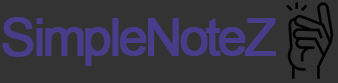
<style>
.page{position:relative;width:338px;height:83px;background:#333333}
.page>*{position:absolute;margin:0}
.t1{font:52.4px "ArialMT";letter-spacing:-0.08em;color:#483d8b;font-weight:bold}
</style>
<div class="page">
<p class="t1" style="left:2px;top:17px;width:274px;height:49px">SimpleNoteZ</p>
</div>
